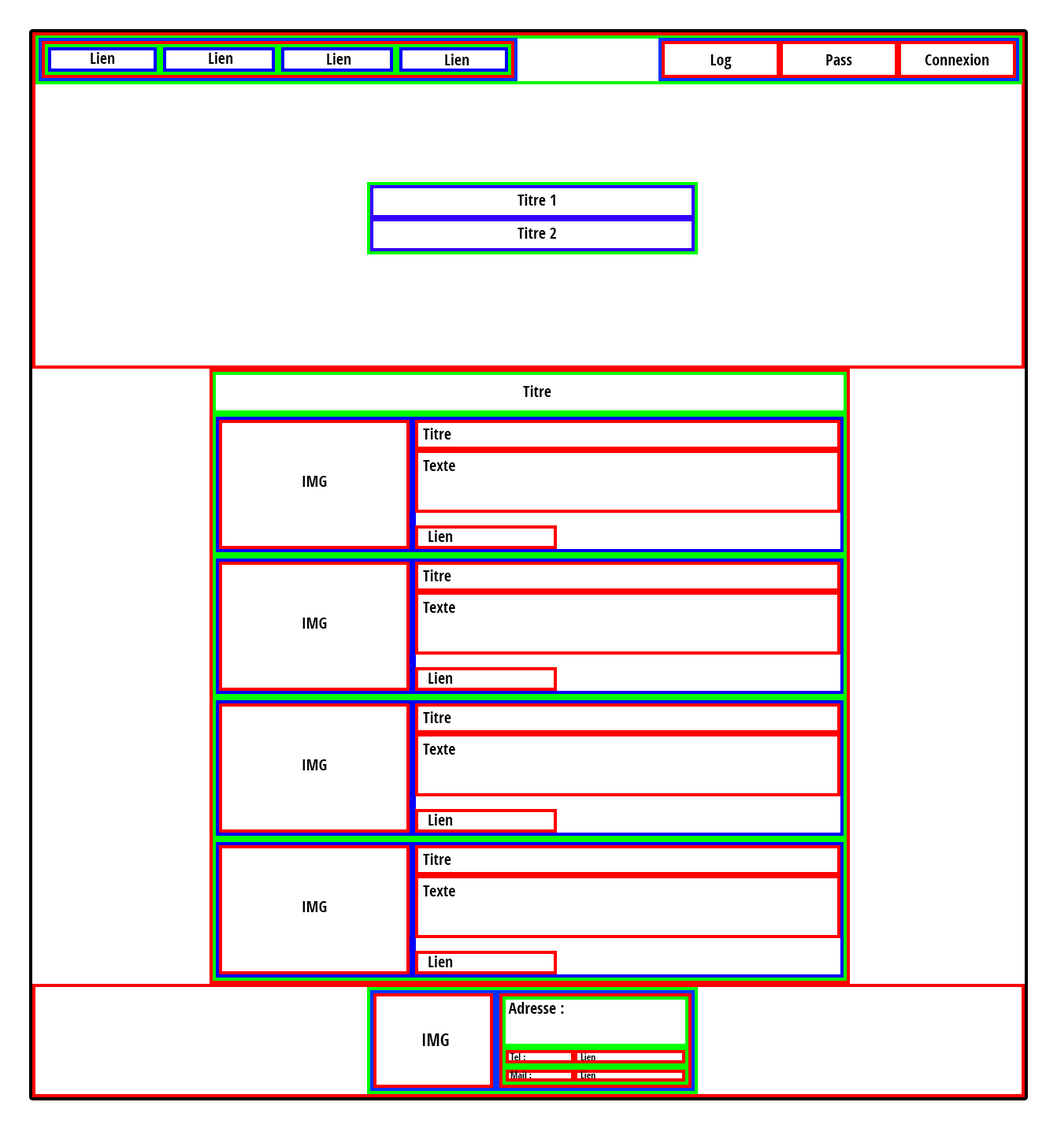
<style>
.page{position:relative;width:1057px;height:1128px;background:#ffffff}
.page>*{position:absolute;margin:0}
.t1{font:15.8px "OpenSansCondensed-Bold";color:#000000}
.t2{font:17.3px "OpenSansCondensed-Bold";color:#000000}
.t3{font:9.5px "OpenSansCondensed-Bold";color:#000000}
</style>
<div class="page">
<p class="t1" style="left:91px;top:52px;width:24px;height:12px">Lien</p>
<p class="t1" style="left:209px;top:52px;width:24px;height:12px">Lien</p>
<p class="t1" style="left:327px;top:53px;width:24px;height:12px">Lien</p>
<p class="t1" style="left:445px;top:54px;width:24px;height:11px">Lien</p>
<p class="t1" style="left:925px;top:54px;width:64px;height:11px">Connexion</p>
<p class="t1" style="left:711px;top:54px;width:21px;height:15px">Log</p>
<p class="t1" style="left:826px;top:54px;width:26px;height:11px">Pass</p>
<p class="t1" style="left:518px;top:194px;width:37px;height:12px">Titre 1</p>
<p class="t1" style="left:518px;top:227px;width:39px;height:12px">Titre 2</p>
<p class="t1" style="left:523px;top:385px;width:28px;height:12px">Titre</p>
<p class="t1" style="left:423px;top:428px;width:28px;height:12px">Titre</p>
<p class="t1" style="left:423px;top:460px;width:32px;height:11px">Texte</p>
<p class="t1" style="left:302px;top:476px;width:25px;height:11px">IMG</p>
<p class="t1" style="left:429px;top:530px;width:24px;height:12px">Lien</p>
<p class="t1" style="left:423px;top:570px;width:28px;height:11px">Titre</p>
<p class="t1" style="left:423px;top:602px;width:32px;height:11px">Texte</p>
<p class="t1" style="left:302px;top:618px;width:25px;height:11px">IMG</p>
<p class="t1" style="left:429px;top:672px;width:24px;height:12px">Lien</p>
<p class="t1" style="left:423px;top:711px;width:28px;height:12px">Titre</p>
<p class="t1" style="left:423px;top:744px;width:32px;height:11px">Texte</p>
<p class="t1" style="left:302px;top:759px;width:25px;height:11px">IMG</p>
<p class="t1" style="left:429px;top:814px;width:24px;height:12px">Lien</p>
<p class="t1" style="left:423px;top:853px;width:28px;height:12px">Titre</p>
<p class="t1" style="left:423px;top:885px;width:32px;height:11px">Texte</p>
<p class="t1" style="left:302px;top:901px;width:25px;height:11px">IMG</p>
<p class="t1" style="left:429px;top:955px;width:24px;height:12px">Lien</p>
<p class="t1" style="left:508px;top:1002px;width:56px;height:12px">Adresse :</p>
<p class="t2" style="left:422px;top:1033px;width:27px;height:13px">IMG</p>
<p class="t3" style="left:510px;top:1053px;width:15px;height:7px">Tel :</p>
<p class="t3" style="left:581px;top:1053px;width:15px;height:7px">Lien</p>
<p class="t3" style="left:510px;top:1071px;width:22px;height:7px">Mail :</p>
<p class="t3" style="left:581px;top:1071px;width:15px;height:7px">Lien</p>
</div>
